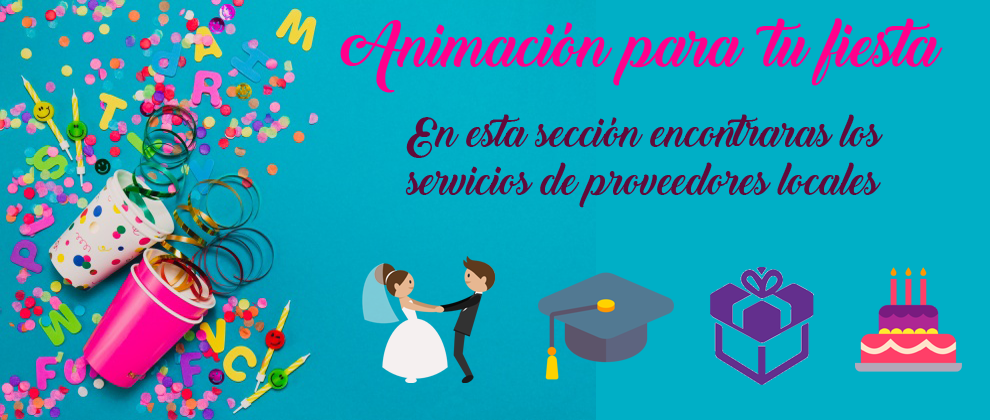
<style>
.page{position:relative;width:990px;height:420px;background:#00afc6}
.page>*{position:absolute;margin:0}
.t1{font:60px "BacktoBlackDemo";color:#ff008c}
.t2{font:40px "BacktoBlackDemo";color:#610a3a}
</style>
<div class="page">
<p class="t1" style="left:340px;top:18px;width:603px;height:75px">Animación para tu fiesta</p>
<p class="t2" style="left:405px;top:114px;width:478px;height:94px;text-align:center">En esta sección encontraras los servicios de proveedores locales</p>
</div>
